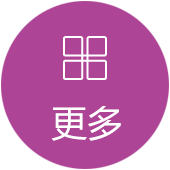
<style>
.page{position:relative;width:170px;height:170px;background:#ad4496}
.page>*{position:absolute;margin:0}
.t1{font:36px "MicrosoftYaHei";color:#ffffff}
</style>
<div class="page">
<p class="t1" style="left:51px;top:106px;width:70px;height:35px">更多</p>
</div>
